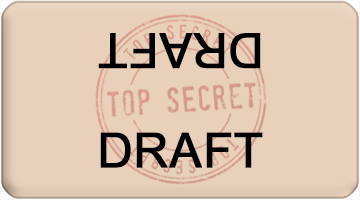
<style>
.page{position:relative;width:360px;height:200px;background:#e8d0bb}
.page>*{position:absolute;margin:0}
.t1{font:48px "ArialMT";color:#000000;font-weight:bold}
</style>
<div class="page">
<p class="t1" style="left:98px;top:33px;width:163px;height:36px;rotate:180deg">DRAFT</p>
<p class="t1" style="left:100px;top:132px;width:163px;height:36px">DRAFT</p>
</div>
